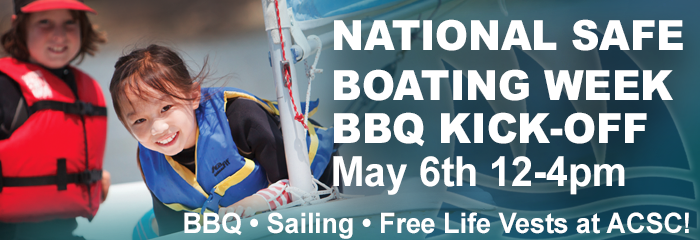
<style>
.page{position:relative;width:700px;height:240px}
.page>*{position:absolute;margin:0}
.t1{font:41.4px "Arial-Black";color:#ffffff;scale:0.95 1}
.t2{font:41.4px "Arial-BoldMT";color:#ffffff;scale:0.95 1}
.t3{font:28.3px "Arial-BoldMT";color:#ffffff;scale:0.95 1}
</style>
<div class="page">
<p class="t1" style="left:333px;top:19px;width:350px;height:176px">NATIONAL SAFE BOATING WEEK<br>BBQ KICK-OFF  <br><span class="t2">May 6th 12-4pm</span></p>
<p class="t3" style="left:184px;top:212px;width:505px;height:27px">BBQ • Sailing • Free Life Vests at ACSC!</p>
</div>
